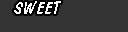
<style>
.page{position:relative;width:128px;height:32px;background:#333333}
.page>*{position:absolute;margin:0}
.t1{font:18px "DomDiagonalBT-Regular";letter-spacing:0.05em;color:#fbfbfb}
</style>
<div class="page">
<p class="t1" style="left:14px;top:1px;width:47px;height:13px">SWEET</p>
</div>
